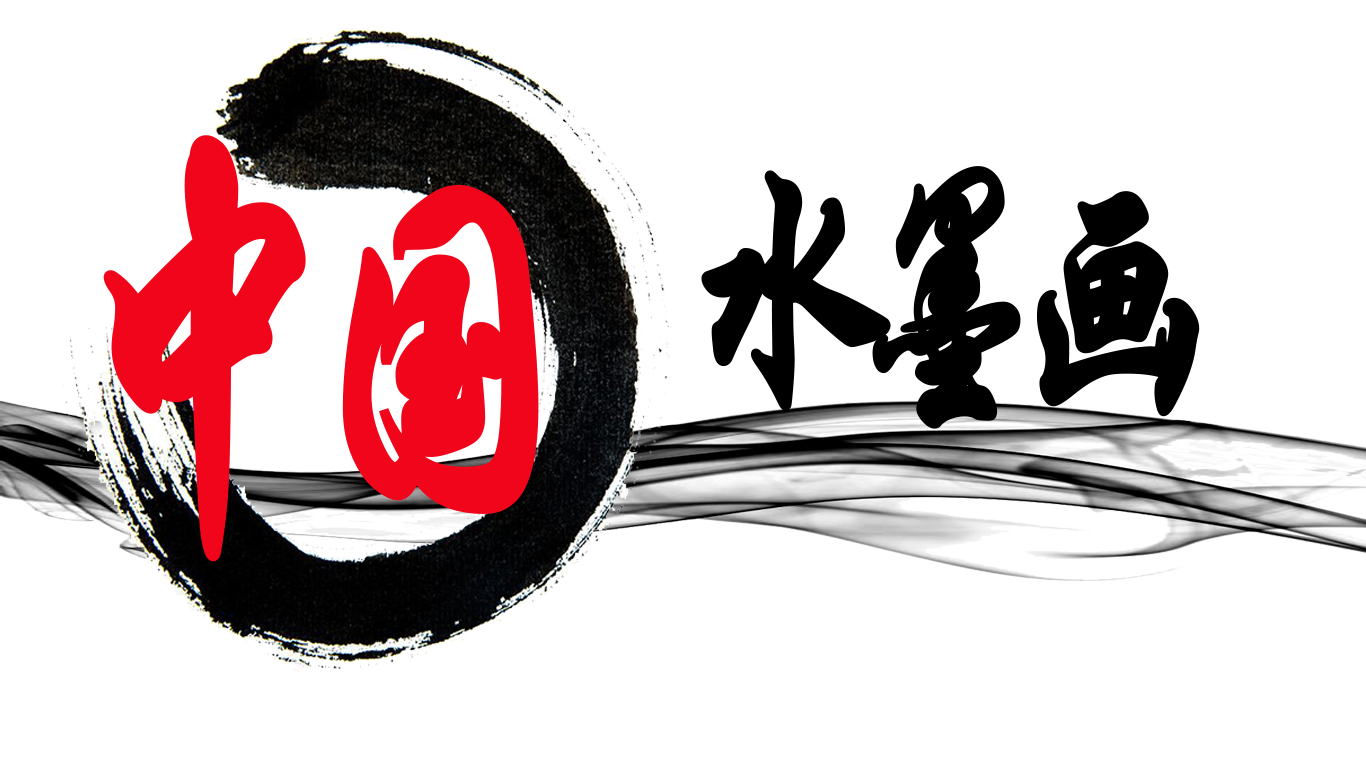
<style>
.page{position:relative;width:1366px;height:768px;background:#ffffff}
.page>*{position:absolute;margin:0}
.t1{font:291.6px "STXingkai";letter-spacing:-0.24em;color:#000000;font-weight:bold;scale:0.71 1}
</style>
<div class="page">
<p class="t1" style="left:701px;top:166px;width:499px;height:263px">水墨画</p>
</div>
